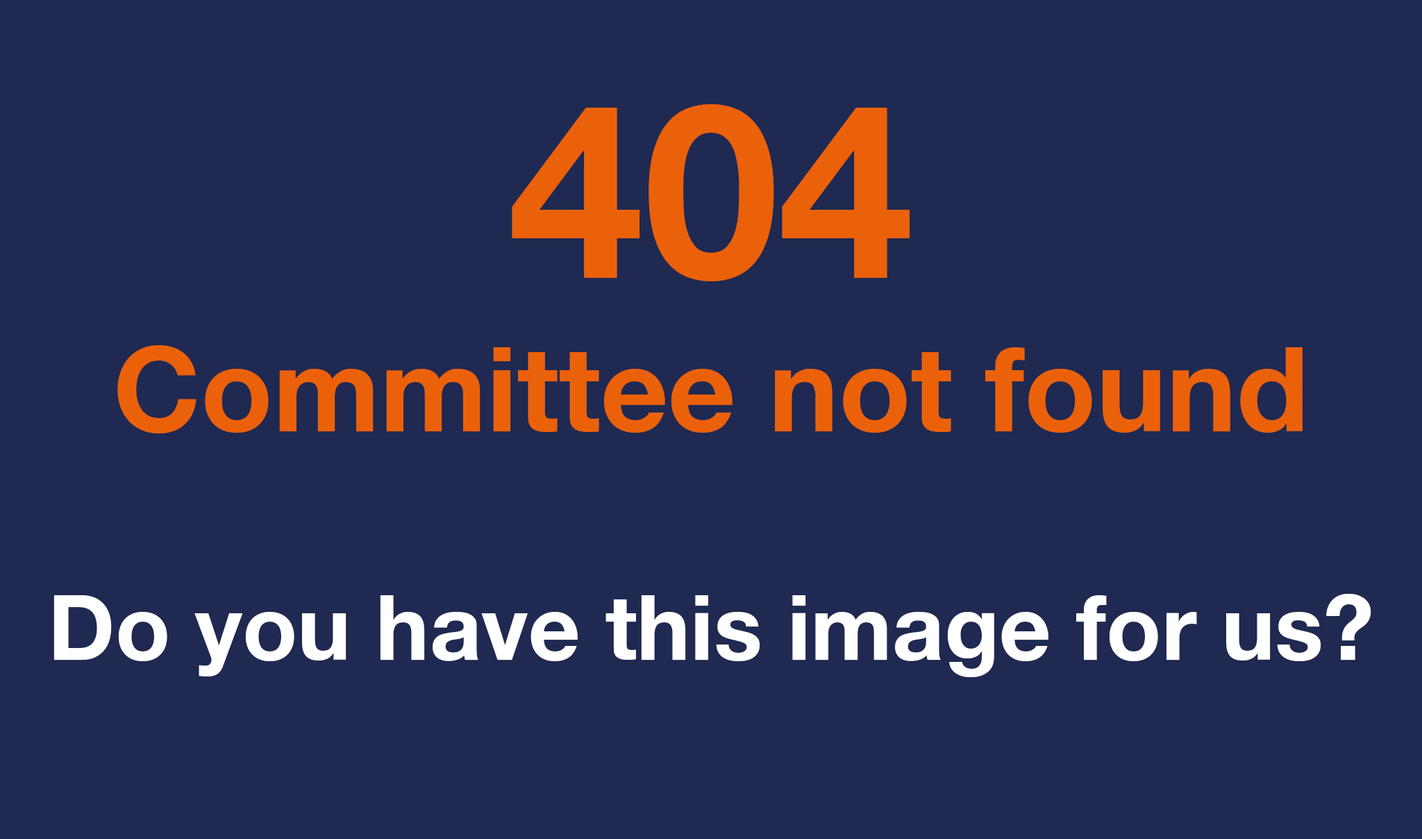
<style>
.page{position:relative;width:1422px;height:839px;background:#1f2951}
.page>*{position:absolute;margin:0}
.t1{font:90.3px "HelveticaNeue-Bold";color:#ffffff}
.t2{font:243px "HelveticaNeue-Bold";color:#eb6109}
.t3{font:118px/33.3px "HelveticaNeue-Bold";color:#eb6109}
</style>
<div class="page">
<p class="t1" style="left:53px;top:104px;width:1318px;height:573px;text-align:center"><span class="t2">404 <br><br></span><span class="t3">Committee not found<br><br></span>Do you have this image for us?</p>
</div>
